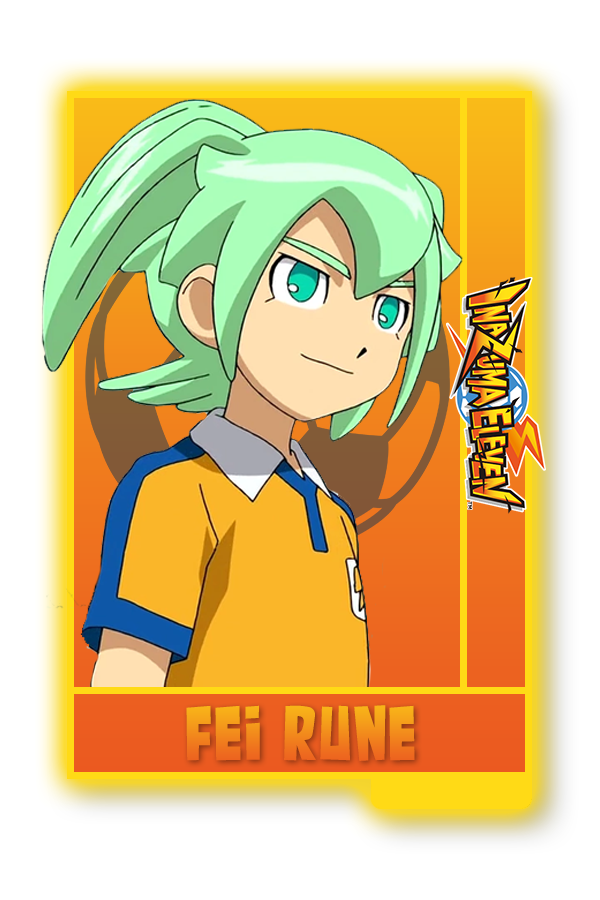
<style>
.page{position:relative;width:600px;height:900px;background:#ffffff}
.page>*{position:absolute;margin:0}
.t1{font:79.9px "TTG-Bold"}
</style>
<div class="page">
<p class="t1" style="left:186px;top:705px;width:229px;height:56px">Fei Rune</p>
</div>
